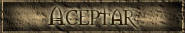
<style>
.page{position:relative;width:185px;height:33px}
.page>*{position:absolute;margin:0}
.t1{font:25.1px "Morpheus"}
</style>
<div class="page">
<p class="t1" style="left:48px;top:5px;width:93px;height:24px">Aceptar</p>
</div>
